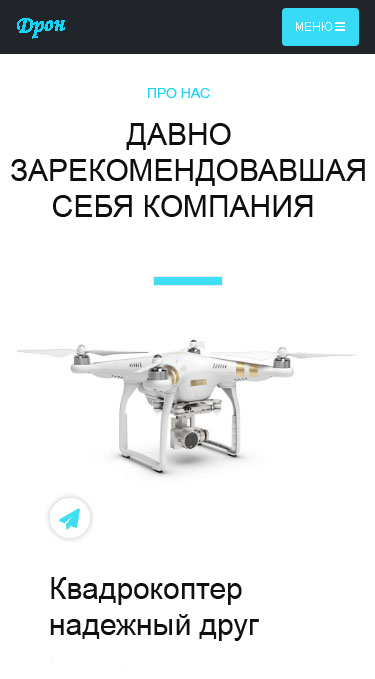
<style>
.page{position:relative;width:375px;height:679px;background:#ffffff}
.page>*{position:absolute;margin:0}
.t1{font:24px "MonotypeCorsiva";color:#10d4fa}
.t2{font:14px "ArialMT";color:#15d6f9}
.t3{font:30px "ArialMT";color:#0e0e0f}
.t4{font:30px "ArialMT";color:#0f1010}
</style>
<div class="page">
<p class="t1" style="left:17px;top:18px;width:48px;height:21px;rotate:7deg">Дрон</p>
<p class="t2" style="left:148px;top:88px;width:62px;height:10px">ПРО НАС</p>
<p class="t3" style="left:11px;top:123px;width:354px;height:94px">ДАВНО <br>ЗАРЕКОМЕНДОВАВШАЯ <br>     СЕБЯ КОМПАНИЯ</p>
<p class="t4" style="left:50px;top:577px;width:209px;height:64px">Квадрокоптер <br>надежный друг</p>
</div>
